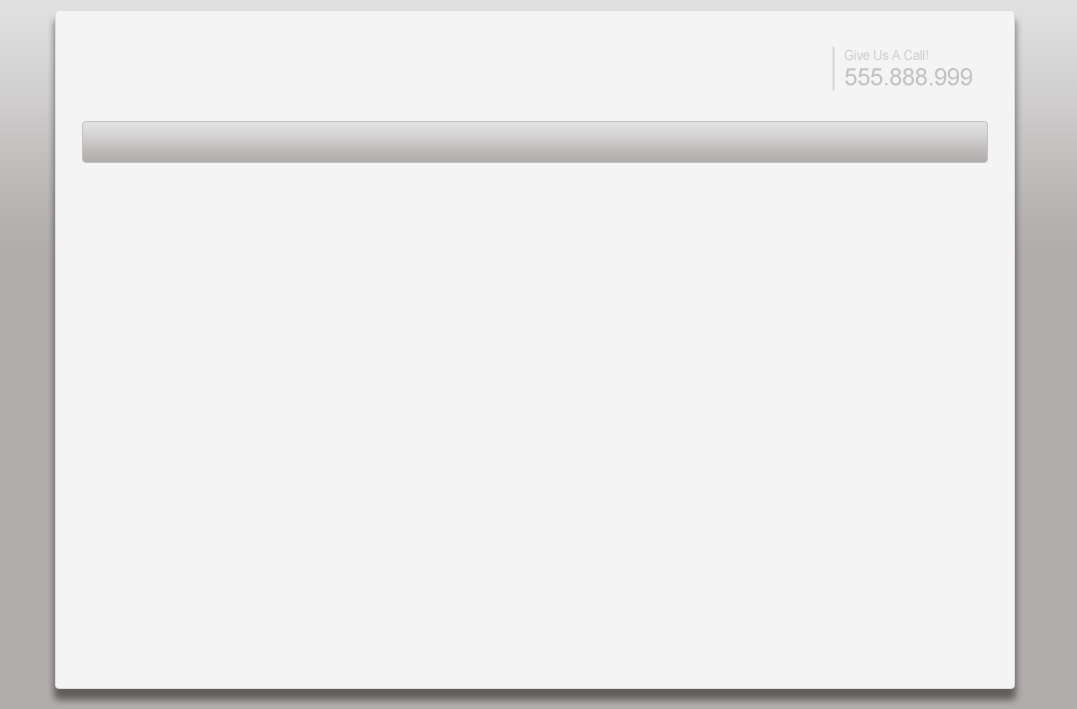
<style>
.page{position:relative;width:1077px;height:709px;background:#f4f4f4}
.page>*{position:absolute;margin:0}
.t1{font:14px "ArialMT";letter-spacing:-0.02em;color:#d1d1d1;scale:0.93 1}
.t2{font:24px "ArialMT";letter-spacing:-0.02em;color:#c3c3c3}
</style>
<div class="page">
<p class="t1" style="left:844px;top:49px;width:84px;height:12px">Give Us A Call!</p>
<p class="t2" style="left:845px;top:68px;width:127px;height:18px">555.888.999</p>
</div>
